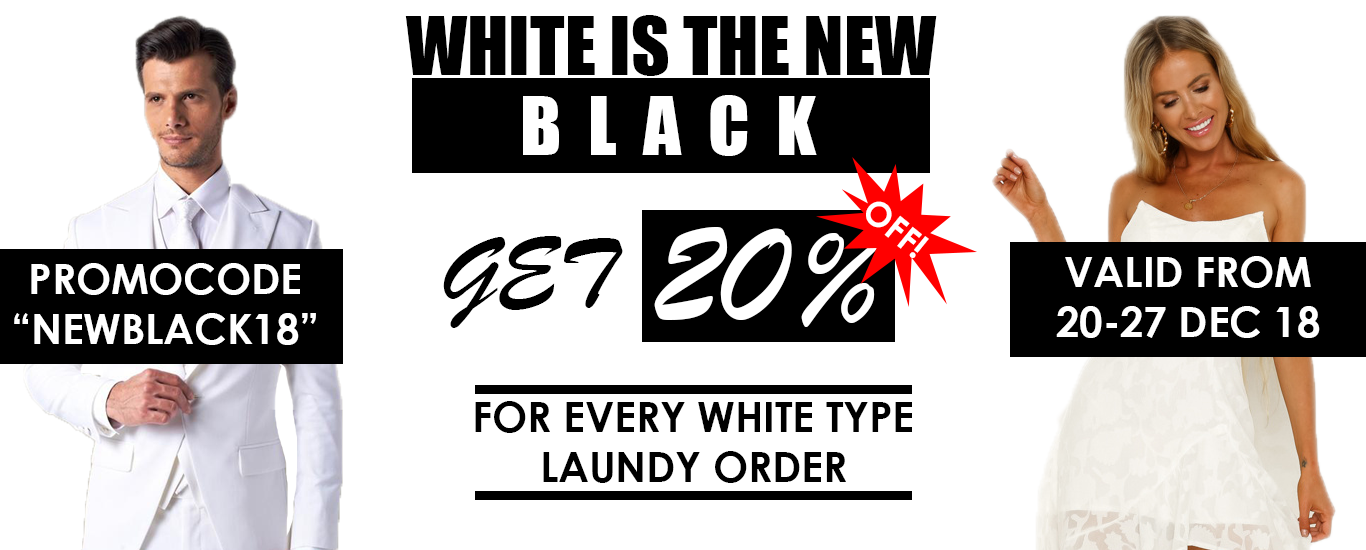
<style>
.page{position:relative;width:1366px;height:550px;background:#ffffff}
.page>*{position:absolute;margin:0}
.t1{font:75px "Impact";color:#000000}
.t2{font:75px "Impact";color:#ffffff}
.t3{font:34.1px "CenturyGothic-Bold";color:#ffffff}
.t4{font:150px "BrushScriptMT";color:#ffffff}
.t5{font:100px "BrushScriptMT";color:#000000}
.t6{font:41.7px "CenturyGothic-Bold";color:#ffffff}
.t7{font:41.7px "CenturyGothic-Bold";color:#000000}
</style>
<div class="page">
<p class="t1" style="left:405px;top:15px;width:532px;height:61px">WHITE IS THE NEW</p>
<p class="t2" style="left:523px;top:95px;width:294px;height:61px">B  L  A  C  K</p>
<p class="t3" style="left:866px;top:201px;width:63px;height:57px;rotate:39deg">OFF!</p>
<p class="t4" style="left:654px;top:227px;width:229px;height:100px">20%</p>
<p class="t5" style="left:443px;top:236px;width:180px;height:92px">GET</p>
<p class="t6" style="left:1056px;top:256px;width:264px;height:82px;text-align:center">VALID FROM<br>20-27 DEC 18</p>
<p class="t6" style="left:14px;top:263px;width:302px;height:82px;text-align:center">PROMOCODE<br>“NEWBLACK18”</p>
<p class="t7" style="left:475px;top:401px;width:437px;height:82px;text-align:center">FOR EVERY WHITE TYPE<br>LAUNDY ORDER</p>
</div>
